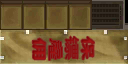
<style>
.page{position:relative;width:128px;height:64px}
.page>*{position:absolute;margin:0}
.t1{font:13.3px "MicrosoftYaHei-Bold";color:#a41818;scale:1.69 1}
.t2{font:14.8px "UDDigiKyokashoNP-R";color:#8a0b0b;scale:1.69 1}
.t3{font:14.1px "MicrosoftYaHeiLight";color:#8b0c0c;scale:1.69 1}
.t4{font:14.1px "UDDigiKyokashoNP-B";color:#a41818;scale:1.69 1}
</style>
<div class="page">
<p class="t1" style="left:32px;top:38px;width:14px;height:22px;rotate:90deg">佣</p>
<p class="t2" style="left:49px;top:39px;width:13px;height:21px;rotate:90deg">雇</p>
<p class="t3" style="left:65px;top:36px;width:14px;height:24px;rotate:90deg">镖</p>
<p class="t4" style="left:81px;top:36px;width:13px;height:24px;rotate:90deg">保</p>
</div>
